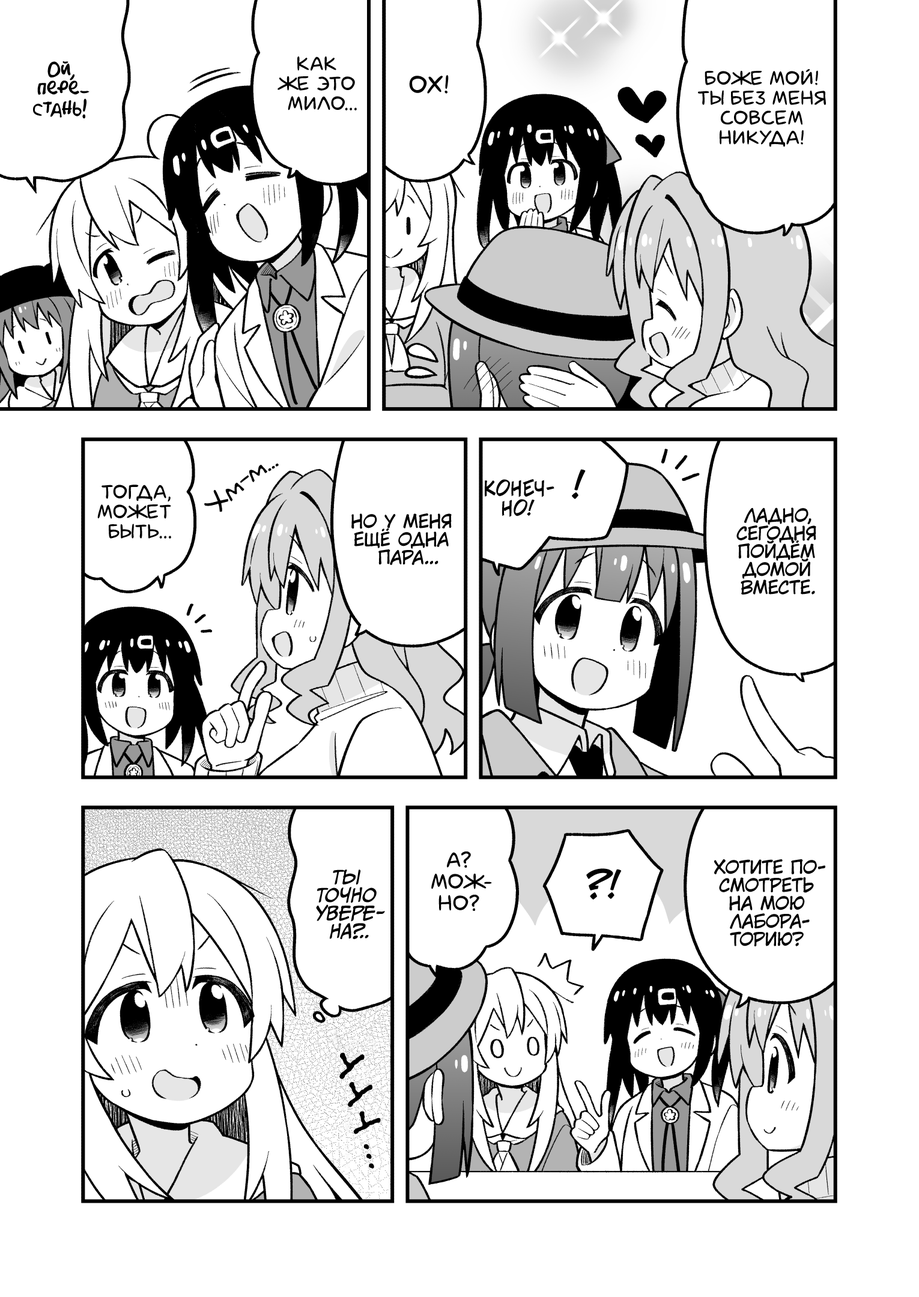
<style>
.page{position:relative;width:919px;height:1297px;background:#ffffff}
.page>*{position:absolute;margin:0}
.t1{font:19.8px "AkbarPlain";color:#000000}
.t2{font:19.8px "laCartoonerie";color:#000000;text-transform:uppercase}
.t3{font:25.2px "laCartoonerie";color:#000000;text-transform:uppercase}
.t4{font:25.2px "v_Augie";color:#000000;scale:0.9 1}
.t5{font:36px "v_CCJeffCampbell";color:#000000;text-transform:uppercase}
.t6{font:19.8px "v_CCJeffCampbell";color:#000000;text-transform:uppercase}
.t7{font:18px "KuraiVoice2";color:#000000;text-transform:uppercase}
.t8{font:21.6px "laCartoonerie";color:#000000;text-transform:uppercase}
.t9{font:18px "CCMeanwhile";color:#000000;text-transform:uppercase;font-style:italic}
.t10{font:39.6px "el_CCEvilSchemes";color:#000000}
.t11{font:37.8px "el_CCEvilSchemes";color:#000000}
.t12{font:36px "el_CCEvilSchemes";color:#000000}
.t13{font:32.4px "el_CCEvilSchemes";letter-spacing:0.1em;color:#000000}
</style>
<div class="page">
<p class="t1" style="left:33px;top:61px;width:57px;height:58px;text-align:center">Ой,<br>пере-<br>стань!</p>
<p class="t2" style="left:278px;top:56px;width:79px;height:55px;text-align:center">Как<br>же это<br>мило...</p>
<p class="t3" style="left:409px;top:75px;width:40px;height:19px">Ох!</p>
<p class="t2" style="left:698px;top:69px;width:128px;height:78px;text-align:center">Боже мой!<br>Ты без меня<br>совсем<br>никуда!</p>
<p class="t4" style="left:204px;top:464px;width:75px;height:48px;rotate:-39deg">Хм-м...</p>
<p class="t5" style="left:572px;top:469px;width:14px;height:30px">!</p>
<p class="t2" style="left:97px;top:485px;width:74px;height:54px;text-align:center">Тогда,<br>может<br>быть...</p>
<p class="t6" style="left:485px;top:479px;width:69px;height:38px;text-align:center">Конеч-<br>но!</p>
<p class="t7" style="left:736px;top:508px;width:80px;height:87px;text-align:center">Ладно,<br>сегодня<br>пойдём<br>домой<br>вместе.</p>
<p class="t7" style="left:351px;top:514px;width:101px;height:51px;text-align:center">Но у меня<br>ещё одна<br>пара...</p>
<p class="t8" style="left:431px;top:852px;width:61px;height:59px;text-align:center">А?<br>Мож-<br>но?</p>
<p class="t9" style="left:316px;top:870px;width:69px;height:69px;text-align:center">Ты<br>точно<br>увере-<br>на?..</p>
<p class="t5" style="left:586px;top:869px;width:36px;height:31px">?!</p>
<p class="t7" style="left:714px;top:859px;width:111px;height:88px;text-align:center">Хотите по-<br>смотреть<br>на мою<br>лабора-<br>торию?</p>
<p class="t10" style="left:339px;top:1053px;width:26px;height:26px;rotate:14deg">у</p>
<p class="t11" style="left:348px;top:1082px;width:25px;height:26px;rotate:18deg">у</p>
<p class="t12" style="left:353px;top:1111px;width:28px;height:24px;rotate:32deg">у</p>
<p class="t13" style="left:363px;top:1144px;width:11px;height:25px;rotate:75deg">...</p>
</div>
